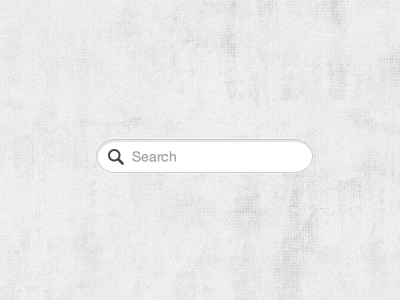
<style>
.page{position:relative;width:400px;height:300px}
.page>*{position:absolute;margin:0}
.t1{font:14px "HelveticaNeue";color:#a6a6a6}
</style>
<div class="page">
<p class="t1" style="left:132px;top:151px;width:44px;height:11px">Search</p>
</div>
